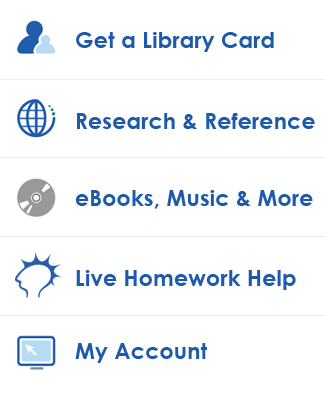
<style>
.page{position:relative;width:325px;height:400px;background:#ffffff}
.page>*{position:absolute;margin:0}
.t1{font:22px "CenturyGothic-Bold";letter-spacing:0.01em;color:#1e5aac}
</style>
<div class="page">
<p class="t1" style="left:76px;top:32px;width:198px;height:20px">Get a Library Card</p>
<p class="t1" style="left:77px;top:113px;width:238px;height:16px">Research &amp; Reference</p>
<p class="t1" style="left:75px;top:190px;width:238px;height:19px">eBooks, Music &amp; More</p>
<p class="t1" style="left:76px;top:270px;width:220px;height:20px">Live Homework Help</p>
<p class="t1" style="left:75px;top:343px;width:132px;height:20px">My Account</p>
</div>
